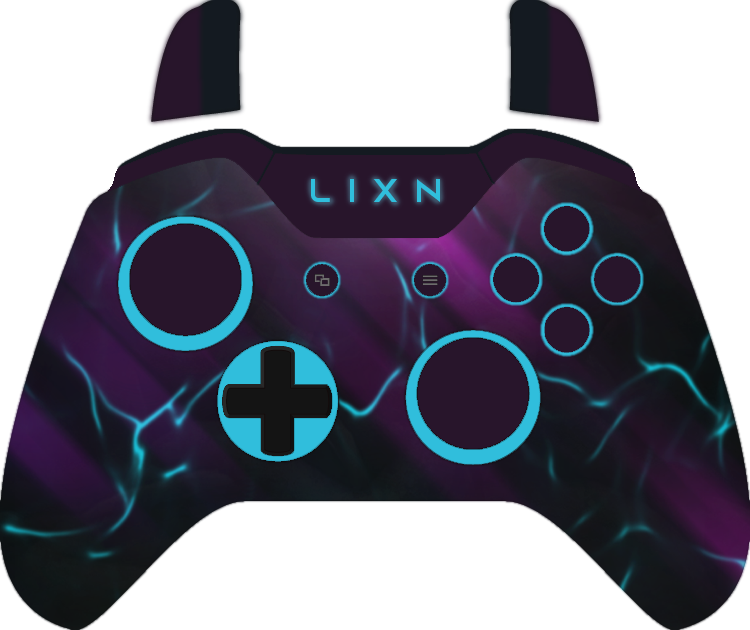
<style>
.page{position:relative;width:750px;height:630px;background:#ffffff}
.page>*{position:absolute;margin:0}
.t1{font:32.9px "AzonixRegular";letter-spacing:0.52em;color:#30bedc}
</style>
<div class="page">
<p class="t1" style="left:311px;top:179px;width:129px;height:23px">LIXN</p>
</div>
